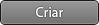
<style>
.page{position:relative;width:99px;height:25px}
.page>*{position:absolute;margin:0}
.t1{font:14px "MyriadPro-Regular";color:#ffffff}
</style>
<div class="page">
<p class="t1" style="left:36px;top:7px;width:28px;height:10px">Criar</p>
</div>
